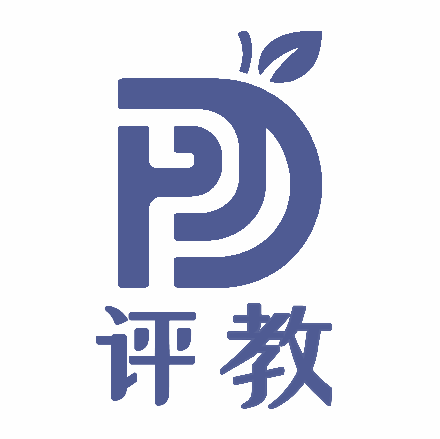
<style>
.page{position:relative;width:440px;height:439px;background:#fefefe}
.page>*{position:absolute;margin:0}
.t1{font:126px "xiaowei";color:#4f5b93;font-weight:bold}
</style>
<div class="page">
<p class="t1" style="left:96px;top:304px;width:235px;height:103px">评教</p>
</div>
